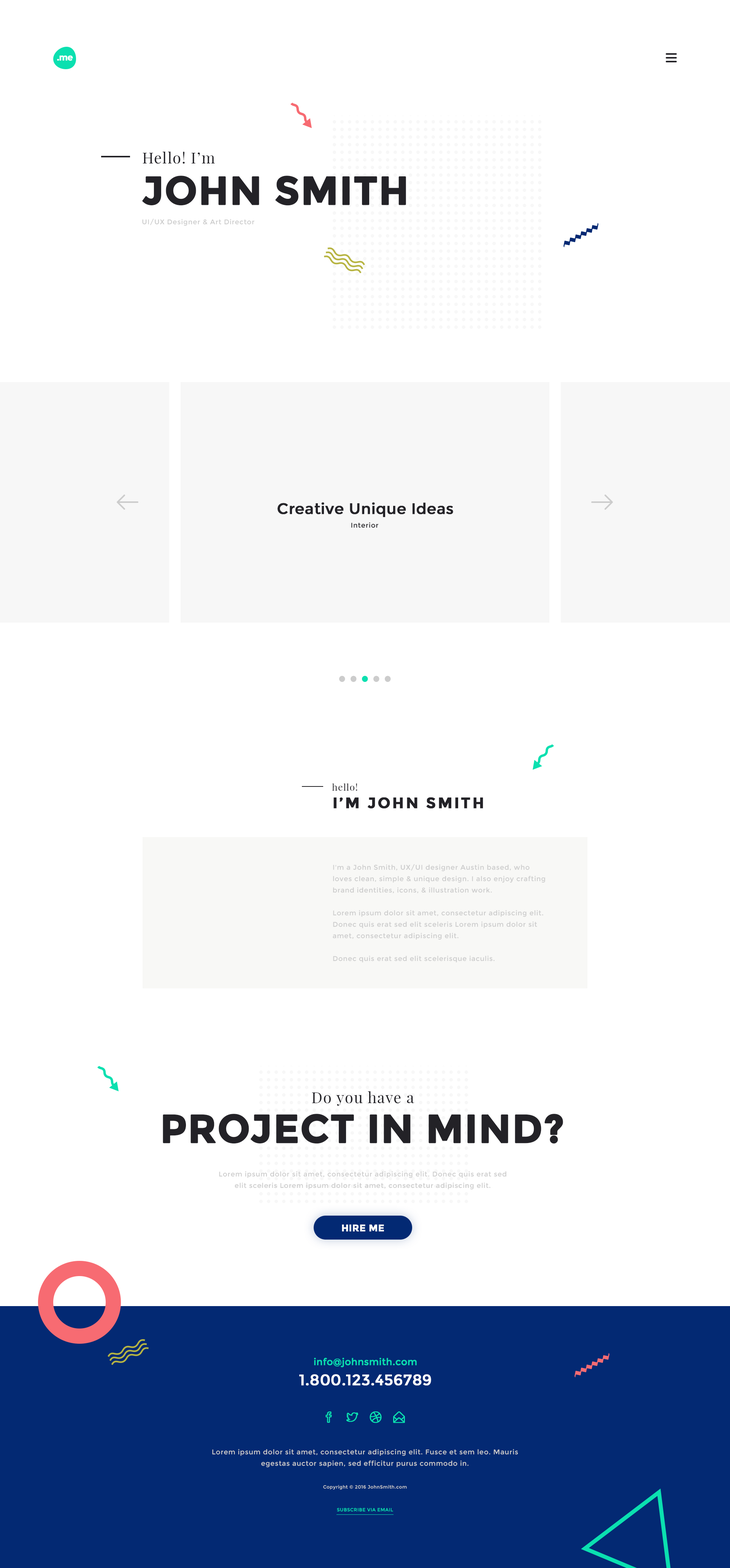
<style>
.page{position:relative;width:730px;height:1568px;background:#ffffff}
.page>*{position:absolute;margin:0}
.t1{font:9px "Montserrat-Bold";letter-spacing:-0.06em;color:#ffffff;font-weight:bold}
.t2{font:15.2px "PlayfairDisplay-Regular";letter-spacing:0.05em;color:#232227}
.t3{font:39.5px "Montserrat-Bold";color:#232227;text-transform:uppercase;font-weight:bold}
.t4{font:6.8px "Montserrat-Regular";letter-spacing:0.05em;color:#cccccc}
.t5{font:15.2px "Montserrat-Regular";color:#232227;font-weight:bold}
.t6{font:6.8px "Montserrat-Regular";letter-spacing:0.05em;color:#232227}
.t7{font:9.5px "PlayfairDisplay-Regular";letter-spacing:0.05em;color:#232227}
.t8{font:15.2px "Montserrat-Bold";letter-spacing:0.1em;color:#232227;text-transform:uppercase;font-weight:bold}
.t9{font:6.8px/11.4px "Montserrat-Regular";letter-spacing:0.05em;color:#cccccc}
.t10{font:39.5px/39.5px "Montserrat-Bold";color:#232227;text-transform:uppercase;font-weight:bold}
.t11{font:9.5px "Montserrat-Bold";color:#ffffff;text-transform:uppercase;font-weight:bold}
.t12{font:9.5px/20.1px "Montserrat-Regular";color:#0be0b0;font-weight:bold}
.t13{font:15.2px/20.1px "Montserrat-Regular";color:#ffffff;font-weight:bold}
.t14{font:4.6px/11.4px "Montserrat-Regular";letter-spacing:0.05em;color:#cccccc}
.t15{font:4.6px/11.4px "Montserrat-Regular";letter-spacing:0.05em;color:#0be0b0}
</style>
<div class="page">
<p class="t1" style="left:57px;top:55px;width:16px;height:6px">.me</p>
<p class="t2" style="left:143px;top:151px;width:72px;height:13px">Hello! I’m</p>
<p class="t3" style="left:142px;top:176px;width:264px;height:30px">JOHN SMITH</p>
<p class="t4" style="left:142px;top:219px;width:112px;height:7px">UI/UX Designer &amp; Art Director</p>
<p class="t5" style="left:277px;top:502px;width:176px;height:15px">Creative Unique Ideas</p>
<p class="t6" style="left:351px;top:522px;width:27px;height:6px">Interior</p>
<p class="t7" style="left:332px;top:783px;width:25px;height:8px">hello!</p>
<p class="t8" style="left:333px;top:797px;width:150px;height:12px">I’M JOHN SMITH</p>
<p class="t9" style="left:333px;top:864px;width:212px;height:98px">I'm a John Smith, UX/UI designer Austin based, who loves clean, simple &amp; unique design. I also enjoy crafting brand identities, icons, &amp; illustration work.<br><br>Lorem ipsum dolor sit amet, consectetur adipiscing elit. Donec quis erat sed elit sceleris Lorem ipsum dolor sit amet, consectetur adipiscing elit. <br><br>Donec quis erat sed elit scelerisque iaculis.</p>
<p class="t10" style="left:163px;top:1091px;width:400px;height:53px;text-align:center"><span class="t2">Do you have a<br></span>project in mind?</p>
<p class="t9" style="left:219px;top:1171px;width:287px;height:18px;text-align:center">Lorem ipsum dolor sit amet, consectetur adipiscing elit. Donec quis erat sed elit sceleris Lorem ipsum dolor sit amet, consectetur adipiscing elit.</p>
<p class="t11" style="left:342px;top:1224px;width:42px;height:8px">HIRE ME</p>
<p class="t12" style="left:299px;top:1358px;width:132px;height:28px;text-align:center">info@johnsmith.com<br><span class="t13">1.800.123.456789</span></p>
<p class="t9" style="left:212px;top:1449px;width:306px;height:63px;text-align:center">Lorem ipsum dolor sit amet, consectetur adipiscing elit. Fusce et sem leo. Mauris egestas auctor sapien, sed efficitur purus commodo in. <br><br><span class="t14">Copyright © 2016 JohnSmith.com<br><br></span><span class="t15">SUBSCRIBE VIA EMAIL</span></p>
</div>
